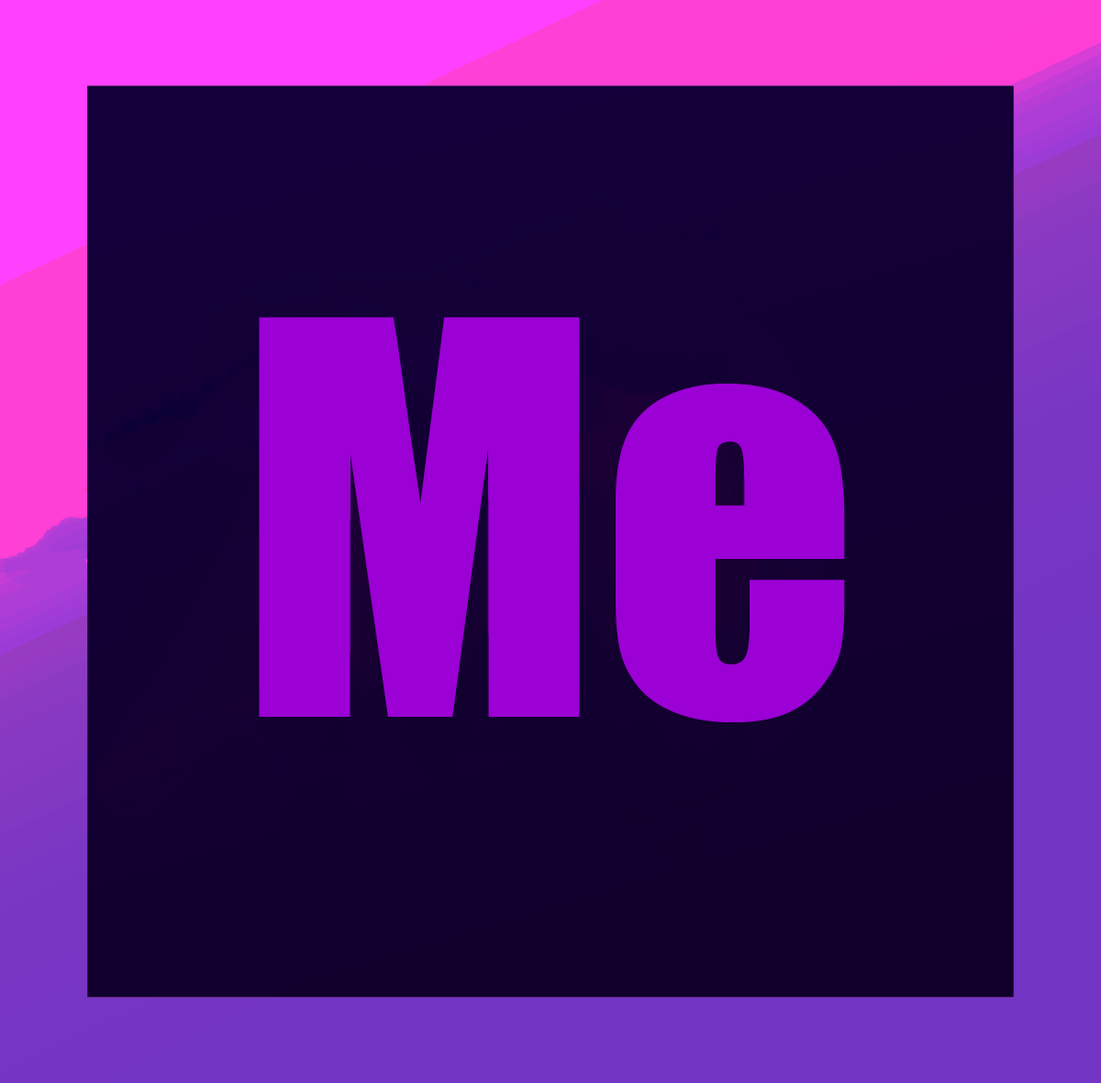
<style>
.page{position:relative;width:1101px;height:1083px}
.page>*{position:absolute;margin:0}
.t1{font:504.7px "Impact";color:#9b00d5}
</style>
<div class="page">
<p class="t1" style="left:259px;top:317px;width:586px;height:405px">Me</p>
</div>
